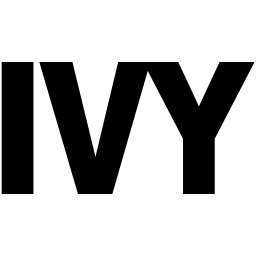
<style>
.page{position:relative;width:256px;height:256px;background:#ffffff}
.page>*{position:absolute;margin:0}
.t1{font:183.7px "Arial-Black";letter-spacing:-0.05em;color:#000000;scale:0.78 1}
</style>
<div class="page">
<p class="t1" style="left:1px;top:62px;width:254px;height:132px">IVY</p>
</div>
